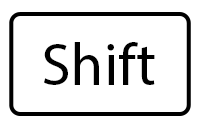
<style>
.page{position:relative;width:200px;height:128px;background:#ffffff}
.page>*{position:absolute;margin:0}
.t1{font:60px "MyriadPro-Regular";color:#000000}
</style>
<div class="page">
<p class="t1" style="left:44px;top:42px;width:111px;height:43px">Shift</p>
</div>
